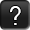
<style>
.page{position:relative;width:30px;height:30px;background:#1d1d1d}
.page>*{position:absolute;margin:0}
.t1{font:24px "SinhalaSangamMN";color:#ffffff}
</style>
<div class="page">
<p class="t1" style="left:10px;top:6px;width:11px;height:19px">?</p>
</div>
